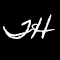
<style>
.page{position:relative;width:60px;height:60px;background:#000000}
.page>*{position:absolute;margin:0}
.t1{font:24px "HomemadeApple";letter-spacing:0.01em;color:#ffffff}
</style>
<div class="page">
<p class="t1" style="left:3px;top:14px;width:52px;height:25px">TH</p>
</div>
